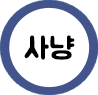
<style>
.page{position:relative;width:98px;height:95px;background:#ffffff}
.page>*{position:absolute;margin:0}
.t1{font:30px "BMJUA";color:#000000}
</style>
<div class="page">
<p class="t1" style="left:24px;top:35px;width:51px;height:25px">사냥</p>
</div>
